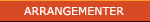
<style>
.page{position:relative;width:150px;height:22px;background:#d84a24}
.page>*{position:absolute;margin:0}
.t1{font:11px "Verdana";color:#ffffff}
</style>
<div class="page">
<p class="t1" style="left:24px;top:6px;width:100px;height:10px">ARRANGEMENTER</p>
</div>
